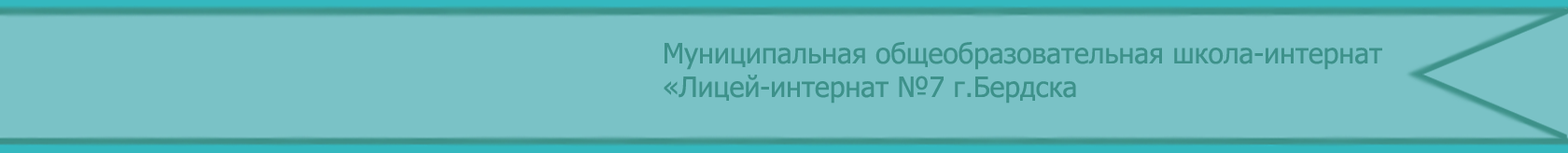
<style>
.page{position:relative;width:1568px;height:153px;background:#7ac2c6}
.page>*{position:absolute;margin:0}
.t1{font:28px "Tahoma";color:#3d918a}
</style>
<div class="page">
<p class="t1" style="left:664px;top:42px;width:718px;height:62px">Муниципальная общеобразовательная школа-интернат <br>«Лицей-интернат №7 г.Бердска</p>
</div>
